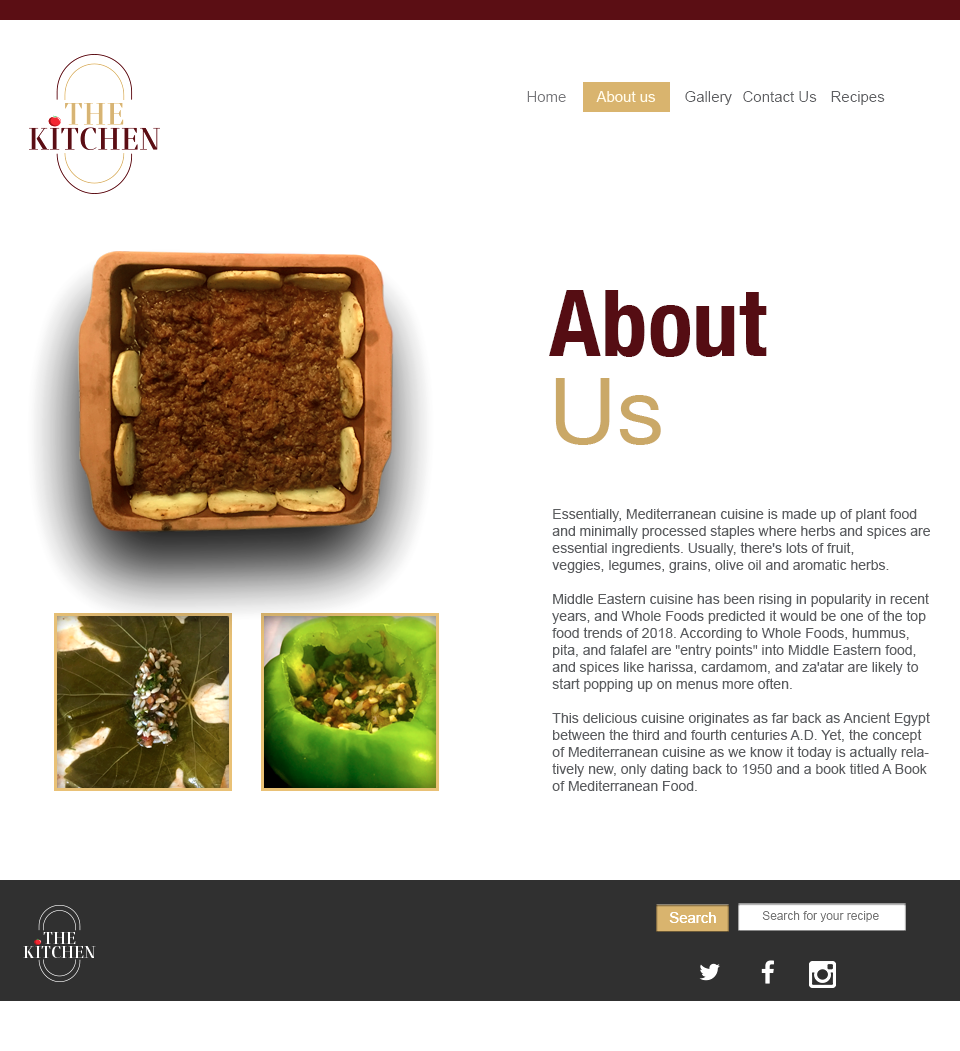
<style>
.page{position:relative;width:960px;height:1051px;background:#ffffff}
.page>*{position:absolute;margin:0}
.t1{font:15px "ArialMT";color:#77777a}
.t2{font:15px "ArialMT";color:#ffffff}
.t3{font:15px "ArialMT";color:#58595b}
.t4{font:15px "ArialMT";color:#5e5f62}
.t5{font:93px/88.1px "HelveticaNeue-CondensedBold";color:#550d13}
.t6{font:93px/88.1px "HelveticaNeue";color:#caa867}
.t7{font:14px/17px "ArialMT";color:#5b5d60}
.t8{font:14.9px "ArialMT";color:#ffffff}
.t9{font:11.9px "ArialMT";color:#6e6e6e}
</style>
<div class="page">
<p class="t1" style="left:527px;top:91px;width:39px;height:11px">Home</p>
<p class="t2" style="left:596px;top:91px;width:60px;height:11px">About us</p>
<p class="t3" style="left:685px;top:91px;width:47px;height:14px">Gallery</p>
<p class="t4" style="left:743px;top:91px;width:74px;height:11px">Contact Us</p>
<p class="t3" style="left:831px;top:91px;width:54px;height:14px">Recipes</p>
<p class="t5" style="left:549px;top:290px;width:218px;height:155px">About <br><span class="t6">Us</span></p>
<p class="t7" style="left:552px;top:508px;width:378px;height:283px">Essentially, Mediterranean cuisine is made up of plant food and minimally processed staples where herbs and spices are essential ingredients. Usually, there's lots of fruit, <br>veggies, legumes, grains, olive oil and aromatic herbs.<br><br>Middle Eastern cuisine has been rising in popularity in recent years, and Whole Foods predicted it would be one of the top food trends of 2018. According to Whole Foods, hummus, pita, and falafel are "entry points" into Middle Eastern food, and spices like harissa, cardamom, and za'atar are likely to start popping up on menus more often. <br><br>This delicious cuisine originates as far back as Ancient Egypt between the third and fourth centuries A.D. Yet, the concept of Mediterranean cuisine as we know it today is actually relatively new, only dating back to 1950 and a book titled A Book of Mediterranean Food.</p>
<p class="t8" style="left:669px;top:912px;width:47px;height:11px">Search</p>
<p class="t9" style="left:762px;top:911px;width:117px;height:11px">Search for your recipe</p>
</div>
